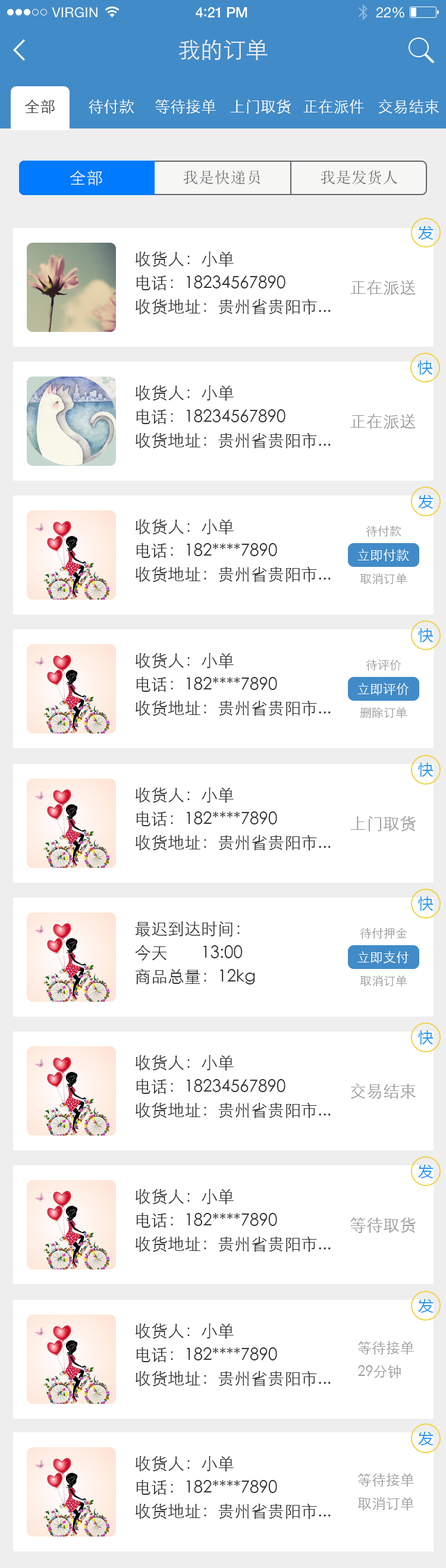
<style>
.page{position:relative;width:446px;height:1568px;background:#ffffff}
.page>*{position:absolute;margin:0}
.t1{font:13.7px "HelveticaNeue";letter-spacing:0.02em;color:#ffffff}
.t2{font:14.3px "HelveticaNeue-Medium";letter-spacing:-0.02em;color:#ffffff}
.t3{font:15.5px "Avenir-Medium";letter-spacing:-0.02em;color:#ffffff}
.t4{font:14.3px "HelveticaNeue";letter-spacing:-0.02em;color:#ffffff}
.t5{font:22.6px "STXihei";color:#eeeeee}
.t6{font:15.5px "STXihei";color:#333333}
.t7{font:15.5px "STXihei";color:#ffffff}
.t8{font:16.7px "STXihei";letter-spacing:0.02em;color:#ffffff}
.t9{font:15.5px "SimSun";letter-spacing:0.03em;color:#666666}
.t10{font:15.5px "SimSun";letter-spacing:0.01em;color:#666666}
.t11{font:15.5px "MicrosoftYaHei";color:#2e97ee}
.t12{font:16.7px/23.8px "STXihei";color:#333333}
.t13{font:16.7px "STXihei";color:#999999}
.t14{font:11.9px "STXihei";color:#999999}
.t15{font:13.1px "STXihei";color:#ffffff}
.t16{font:14.3px/23.8px "STXihei";color:#999999}
</style>
<div class="page">
<p class="t1" style="left:52px;top:7px;width:46px;height:11px">VIRGIN</p>
<p class="t2" style="left:196px;top:7px;width:51px;height:11px">4<span class="t3">:</span>21 PM</p>
<p class="t4" style="left:376px;top:7px;width:28px;height:11px">22%</p>
<p class="t5" style="left:179px;top:39px;width:89px;height:21px">我的订单</p>
<p class="t6" style="left:25px;top:99px;width:30px;height:15px">全部</p>
<p class="t7" style="left:89px;top:99px;width:45px;height:15px">待付款</p>
<p class="t7" style="left:155px;top:99px;width:61px;height:15px">等待接单</p>
<p class="t7" style="left:230px;top:99px;width:61px;height:15px">上门取货</p>
<p class="t7" style="left:303px;top:99px;width:61px;height:15px">正在派件</p>
<p class="t7" style="left:378px;top:99px;width:61px;height:15px">交易结束</p>
<p class="t8" style="left:70px;top:170px;width:32px;height:16px">全部</p>
<p class="t9" style="left:183px;top:170px;width:77px;height:14px">我是快递员</p>
<p class="t10" style="left:321px;top:170px;width:77px;height:15px">我是发货人</p>
<p class="t11" style="left:418px;top:226px;width:16px;height:14px">发</p>
<p class="t12" style="left:135px;top:251px;width:196px;height:64px">收货人：小单<br>电话：18234567890<br>收货地址：贵州省贵阳市...</p>
<p class="t13" style="left:350px;top:280px;width:66px;height:15px">正在派送</p>
<p class="t11" style="left:418px;top:360px;width:15px;height:15px">快</p>
<p class="t12" style="left:135px;top:385px;width:196px;height:64px">收货人：小单<br>电话：18234567890<br>收货地址：贵州省贵阳市...</p>
<p class="t13" style="left:350px;top:413px;width:66px;height:16px">正在派送</p>
<p class="t11" style="left:418px;top:495px;width:16px;height:14px">发</p>
<p class="t12" style="left:135px;top:519px;width:196px;height:63px">收货人：小单<br>电话：182****7890<br>收货地址：贵州省贵阳市...</p>
<p class="t14" style="left:366px;top:526px;width:36px;height:11px">待付款</p>
<p class="t15" style="left:357px;top:549px;width:52px;height:13px">立即付款</p>
<p class="t14" style="left:360px;top:573px;width:47px;height:11px">取消订单</p>
<p class="t11" style="left:418px;top:628px;width:16px;height:14px">快</p>
<p class="t12" style="left:135px;top:653px;width:196px;height:63px">收货人：小单<br>电话：182****7890<br>收货地址：贵州省贵阳市...</p>
<p class="t14" style="left:366px;top:660px;width:36px;height:11px">待评价</p>
<p class="t15" style="left:357px;top:683px;width:52px;height:12px">立即评价</p>
<p class="t14" style="left:360px;top:707px;width:47px;height:11px">删除订单</p>
<p class="t11" style="left:418px;top:763px;width:16px;height:14px">快</p>
<p class="t12" style="left:135px;top:787px;width:196px;height:64px">收货人：小单<br>电话：182****7890<br>收货地址：贵州省贵阳市...</p>
<p class="t13" style="left:350px;top:816px;width:66px;height:16px">上门取货</p>
<p class="t11" style="left:418px;top:896px;width:16px;height:15px">快</p>
<p class="t12" style="left:135px;top:921px;width:120px;height:63px">最迟到达时间：<br>今天        13:00<br>商品总量：12kg</p>
<p class="t14" style="left:360px;top:927px;width:47px;height:12px">待付押金</p>
<p class="t15" style="left:357px;top:951px;width:52px;height:13px">立即支付</p>
<p class="t14" style="left:360px;top:975px;width:47px;height:11px">取消订单</p>
<p class="t11" style="left:418px;top:1030px;width:16px;height:15px">快</p>
<p class="t12" style="left:135px;top:1055px;width:196px;height:63px">收货人：小单<br>电话：18234567890<br>收货地址：贵州省贵阳市...</p>
<p class="t13" style="left:351px;top:1083px;width:65px;height:16px">交易结束</p>
<p class="t11" style="left:418px;top:1165px;width:16px;height:13px">发</p>
<p class="t12" style="left:135px;top:1188px;width:196px;height:64px">收货人：小单<br>电话：182****7890<br>收货地址：贵州省贵阳市...</p>
<p class="t13" style="left:350px;top:1217px;width:66px;height:16px">等待取货</p>
<p class="t11" style="left:418px;top:1299px;width:16px;height:14px">发</p>
<p class="t12" style="left:135px;top:1323px;width:196px;height:64px">收货人：小单<br>电话：182****7890<br>收货地址：贵州省贵阳市...</p>
<p class="t16" style="left:357px;top:1341px;width:57px;height:37px">等待接单<br>29分钟</p>
<p class="t11" style="left:418px;top:1432px;width:16px;height:13px">发</p>
<p class="t12" style="left:135px;top:1456px;width:196px;height:63px">收货人：小单<br>电话：182****7890<br>收货地址：贵州省贵阳市...</p>
<p class="t16" style="left:358px;top:1473px;width:56px;height:37px">等待接单<br>取消订单</p>
</div>
